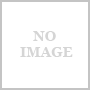
<style>
.page{position:relative;width:90px;height:90px;background:#ffffff}
.page>*{position:absolute;margin:0}
.t1{font:14px "Georgia-Bold";color:#d5d5d5}
</style>
<div class="page">
<p class="t1" style="left:20px;top:31px;width:53px;height:26px;text-align:center">NO <br>IMAGE</p>
</div>
